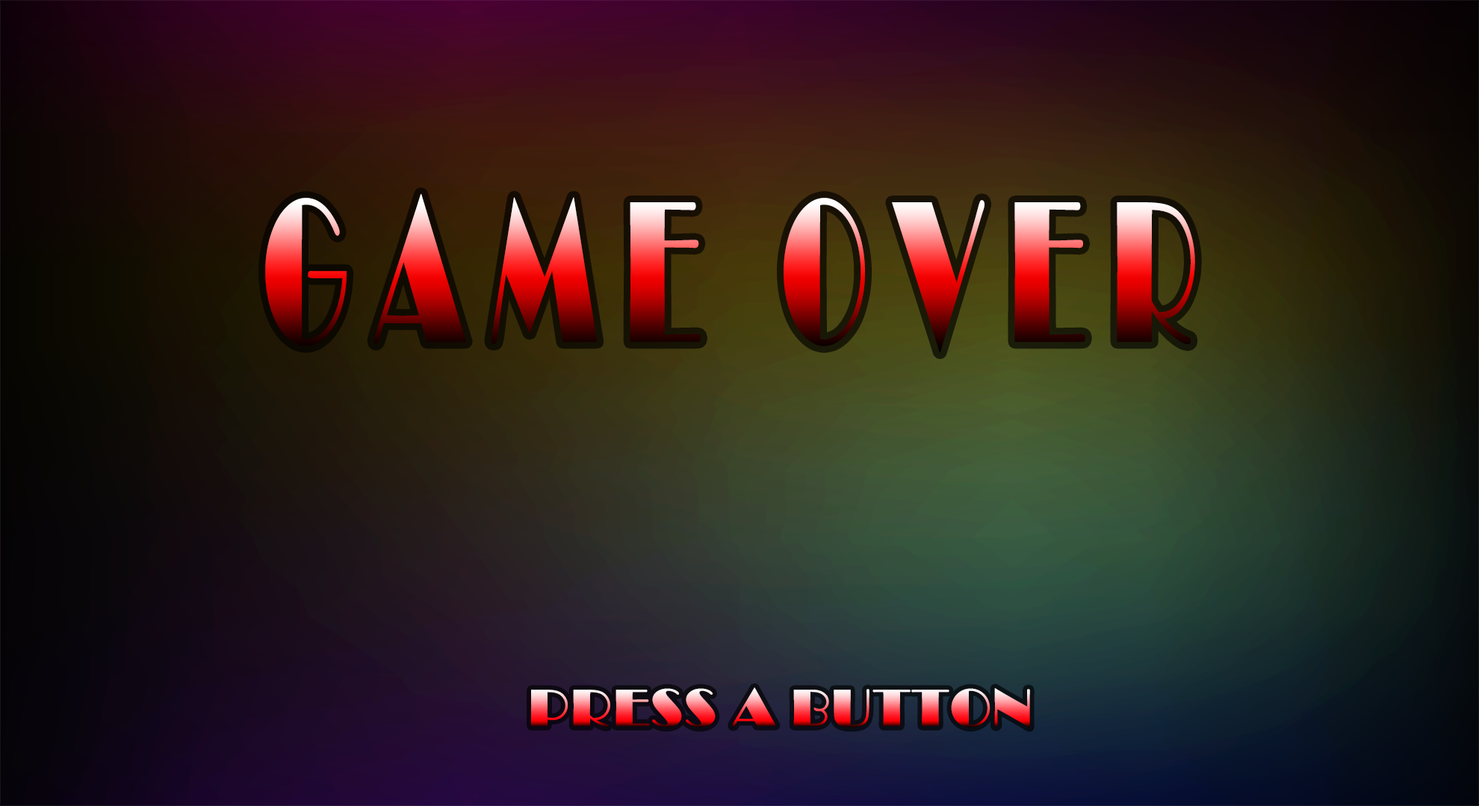
<style>
.page{position:relative;width:1479px;height:806px}
.page>*{position:absolute;margin:0}
.t1{font:209.2px "Broadway";letter-spacing:0.2em;font-weight:bold;scale:0.55 1}
.t2{font:53.8px "Broadway";font-weight:bold}
</style>
<div class="page">
<p class="t1" style="left:265px;top:194px;width:930px;height:159px">GAME OVER</p>
<p class="t2" style="left:531px;top:688px;width:499px;height:40px">PRESS A BUTTON</p>
</div>
